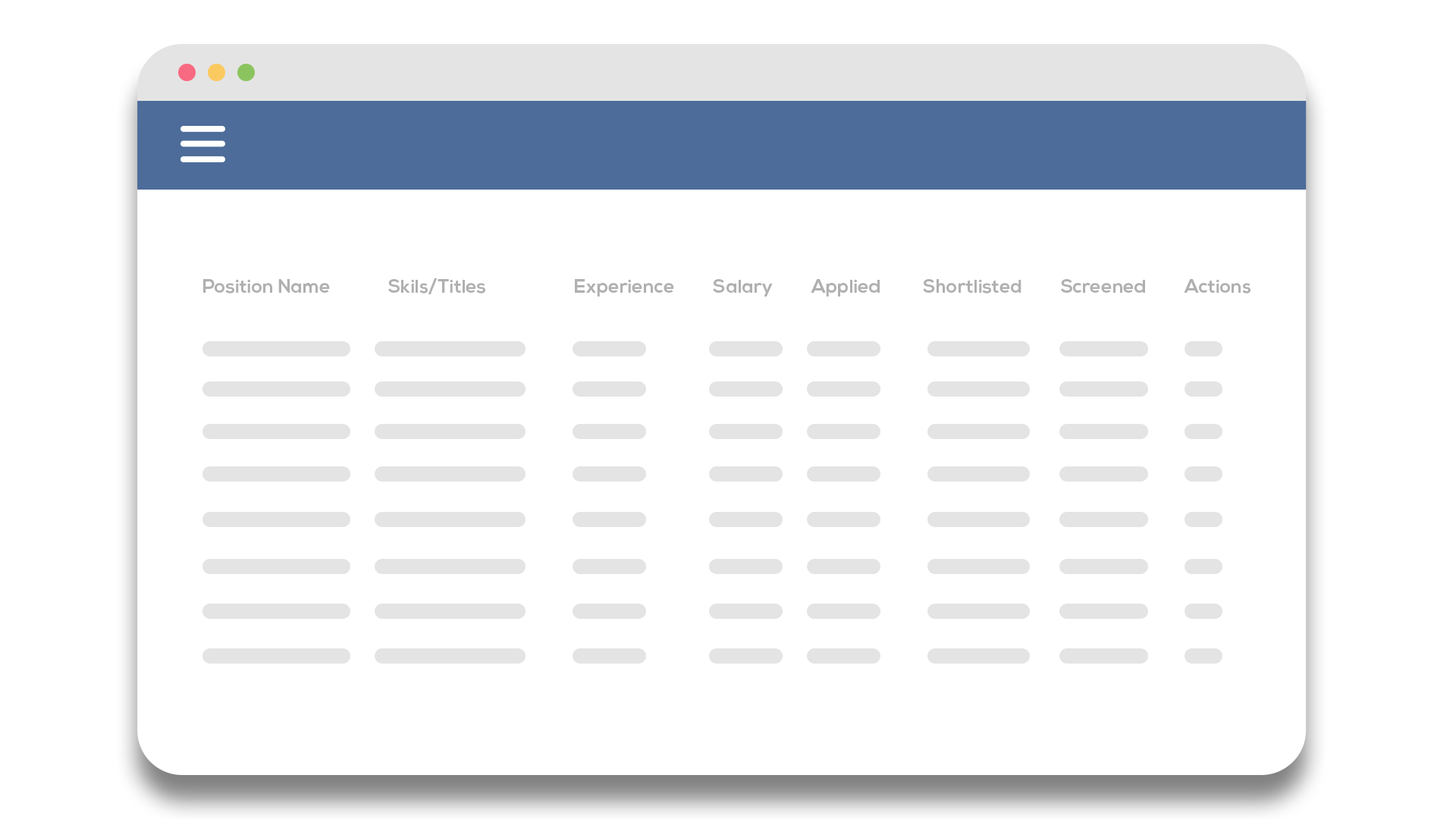
<style>
.page{position:relative;width:1456px;height:819px;background:#ffffff}
.page>*{position:absolute;margin:0}
.t1{font:19px "NexaBold";color:#b0b0b0}
</style>
<div class="page">
<p class="t1" style="left:203px;top:278px;width:1047px;height:19px">Position Name               Skils/Titles                       Experience          Salary          Applied           Shortlisted          Screened          Actions</p>
</div>
